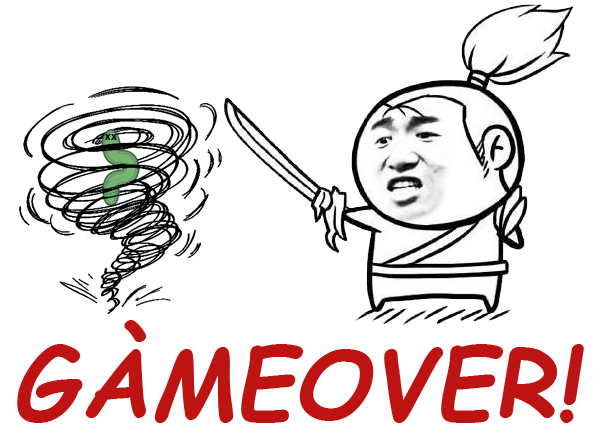
<style>
.page{position:relative;width:600px;height:440px;background:#ffffff}
.page>*{position:absolute;margin:0}
.t1{font:12px "MyriadPro-Regular";color:#000000}
.t2{font:95.4px "ComicSansMS-BoldItalic";color:#be1313}
</style>
<div class="page">
<p class="t1" style="left:105px;top:134px;width:6px;height:6px">x</p>
<p class="t1" style="left:111px;top:134px;width:6px;height:6px">x</p>
<p class="t2" style="left:17px;top:320px;width:567px;height:103px">GÀMEOVER!</p>
</div>
